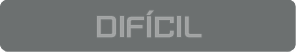
<style>
.page{position:relative;width:296px;height:52px;background:#6c7070}
.page>*{position:absolute;margin:0}
.t1{font:24px "KafuTechnoStd-HV";letter-spacing:0.024em;color:#a0a2a2}
</style>
<div class="page">
<p class="t1" style="left:97px;top:10px;width:105px;height:28px">DIFÍCIL</p>
</div>
